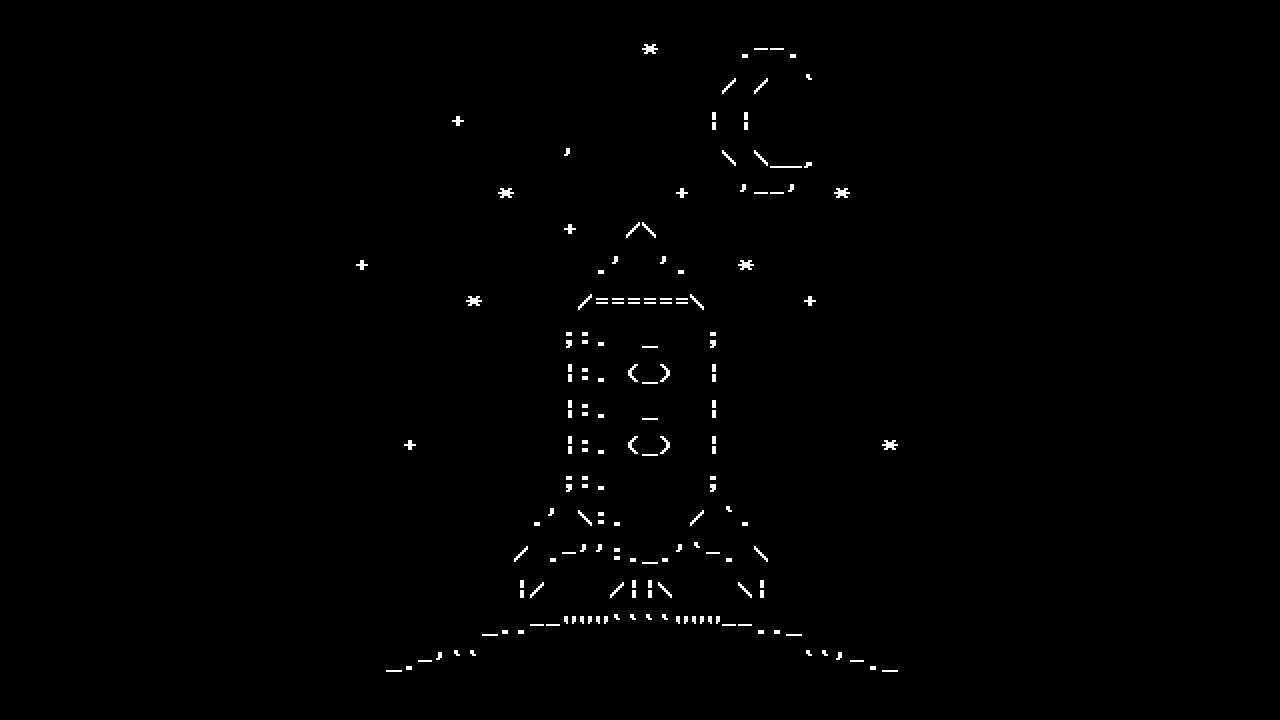
<style>
.page{position:relative;width:1280px;height:720px;background:#000000}
.page>*{position:absolute;margin:0}
.t1{font:30px "Terminal";color:#ffffff}
</style>
<div class="page">
<p class="t1" style="left:356px;top:44px;width:542px;height:628px">*     .--.<br>                                           / /  `<br>                          +               | |<br>                                 '         \ \__,<br>                             *          +   '--'  *<br>                                 +   /\<br>                    +              .'  '.   *<br>                           *      /======\      +<br>                                 ;:.  _   ;<br>                                 |:. (_)  |<br>                                 |:.  _   |<br>                       +         |:. (_)  |          *<br>                                 ;:.      ;<br>                               .' \:.    / `.<br>                              / .-'':._.'`-. \<br>                              |/    /||\    \|<br>                            _..--"""````"""--.._<br>                      _.-'``                    ``'-._</p>
</div>
